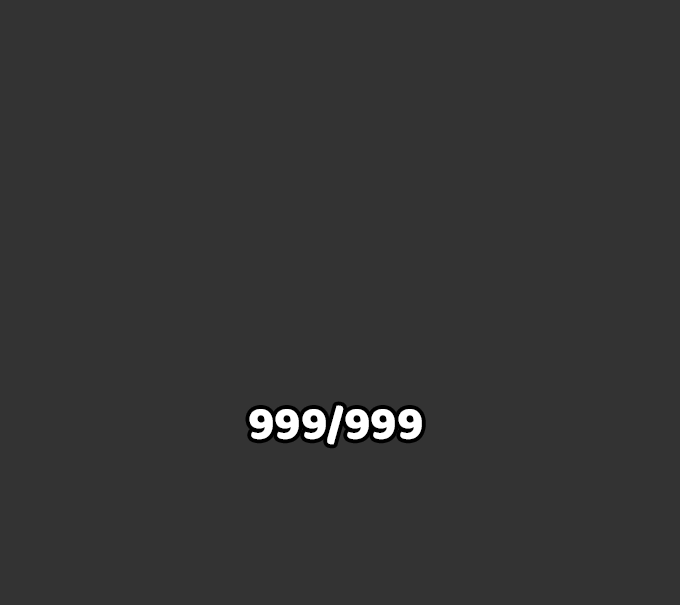
<style>
.page{position:relative;width:680px;height:605px;background:#333333}
.page>*{position:absolute;margin:0}
.t1{font:47.5px "Baloo2-ExtraBold";color:#ffffff}
</style>
<div class="page">
<p class="t1" style="left:249px;top:405px;width:173px;height:40px">999/999</p>
</div>
